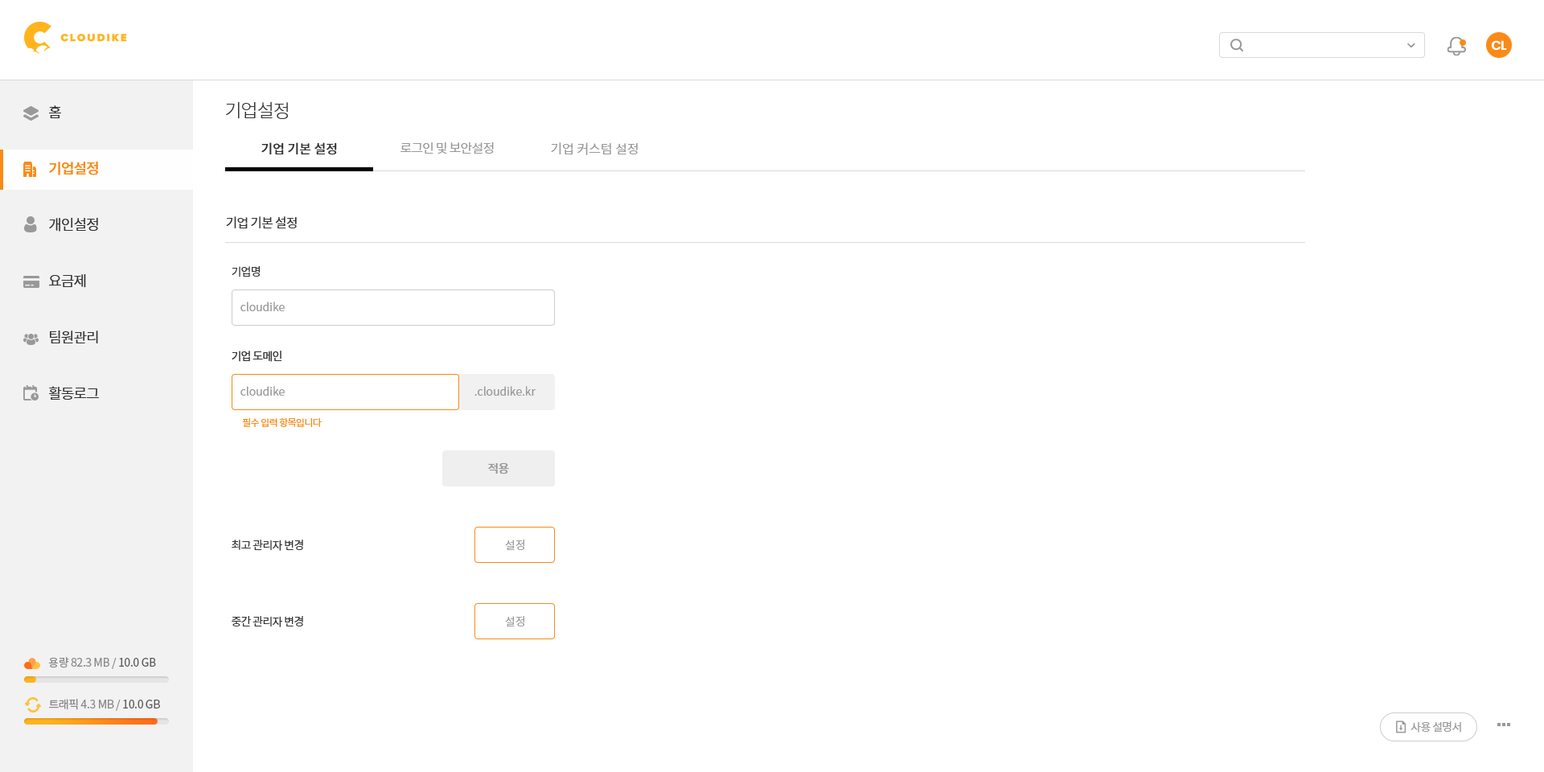
<style>
.page{position:relative;width:1544px;height:772px;background:#ffffff}
.page>*{position:absolute;margin:0}
.t1{font:12.9px "Poppins-SemiBold";letter-spacing:-0.05em;color:#ffffff}
.t2{font:18.5px "NotoSansCJKkr-Light";letter-spacing:-0.05em;color:#333333}
.t3{font:14.5px/56.3px "NotoSansCJKkr-DemiLight";letter-spacing:-0.05em;color:#333333}
.t4{font:14.5px/56.3px "NotoSansCJKkr-Medium";letter-spacing:-0.05em;color:#f98a17}
.t5{font:12.9px "NotoSansCJKkr-Medium";color:#333333}
.t6{font:12.9px "NotoSansCJKkr-DemiLight";letter-spacing:-0.05em;color:#999999}
.t7{font:12.9px "NotoSansCJKkr-DemiLight";color:#999999}
.t8{font:12.9px "NotoSansCJKkr-Regular";letter-spacing:-0.05em;color:#333333}
.t9{font:11.3px "NotoSansCJKkr-Regular";letter-spacing:-0.05em;color:#333333}
.t10{font:11.3px "NotoSansCJKkr-DemiLight";color:#999999}
.t11{font:9.7px "NotoSansCJKkr-DemiLight";letter-spacing:-0.05em;color:#f98a17}
.t12{font:12.1px "NotoSansCJKkr-Medium";letter-spacing:-0.05em;color:#999999}
.t13{font:11.3px "NotoSansCJKkr-Regular";letter-spacing:-0.025em;color:#888888}
.t14{font:11.3px "NotoSansCJKkr-Regular";letter-spacing:-0.025em;color:#585858}
.t15{font:11.3px "NotoSansCJKkr-Regular";letter-spacing:-0.05em;color:#999999}
</style>
<div class="page">
<p class="t1" style="left:1491px;top:40px;width:16px;height:10px">CL</p>
<p class="t2" style="left:226px;top:101px;width:62px;height:18px">기업설정</p>
<p class="t3" style="left:49px;top:105px;width:50px;height:295px">홈<br><span class="t4">기업설정<br></span>개인설정<br>요금제<br>팀원관리<br>활동로그</p>
<p class="t5" style="left:261px;top:142px;width:76px;height:13px">기업 기본 설정</p>
<p class="t6" style="left:401px;top:142px;width:93px;height:12px">로그인 및 보안설정</p>
<p class="t7" style="left:551px;top:142px;width:87px;height:13px">기업 커스텀 설정</p>
<p class="t8" style="left:226px;top:216px;width:71px;height:12px">기업 기본 설정</p>
<p class="t9" style="left:232px;top:266px;width:28px;height:11px">기업명</p>
<p class="t10" style="left:240px;top:302px;width:45px;height:9px">cloudike</p>
<p class="t9" style="left:232px;top:351px;width:50px;height:11px">기업 도메인</p>
<p class="t10" style="left:240px;top:386px;width:45px;height:10px">cloudike</p>
<p class="t10" style="left:475px;top:386px;width:61px;height:10px">.cloudike.kr</p>
<p class="t11" style="left:242px;top:417px;width:80px;height:10px">필수 입력 항목입니다</p>
<p class="t12" style="left:488px;top:462px;width:21px;height:13px">적용</p>
<p class="t9" style="left:232px;top:540px;width:71px;height:11px">최고 관리자 변경</p>
<p class="t10" style="left:505px;top:540px;width:19px;height:10px">설정</p>
<p class="t9" style="left:232px;top:616px;width:71px;height:11px">중간 관리자 변경</p>
<p class="t10" style="left:505px;top:616px;width:19px;height:11px">설정</p>
<p class="t13" style="left:48px;top:657px;width:108px;height:12px">용량 82.3 MB / <span class="t14">10.0 GB</span></p>
<p class="t13" style="left:49px;top:699px;width:111px;height:12px">트래픽 4.3 MB / <span class="t14">10.0 GB</span></p>
<p class="t15" style="left:1411px;top:721px;width:50px;height:12px">사용 설명서</p>
</div>
